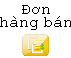
<style>
.page{position:relative;width:71px;height:58px;background:#ffffff}
.page>*{position:absolute;margin:0}
.t1{font:12px/13.3px "CourierNewPSMT";color:#000000}
</style>
<div class="page">
<p class="t1" style="left:0px;top:5px;width:72px;height:25px;text-align:center">Đơn<br>hàng bán</p>
</div>
